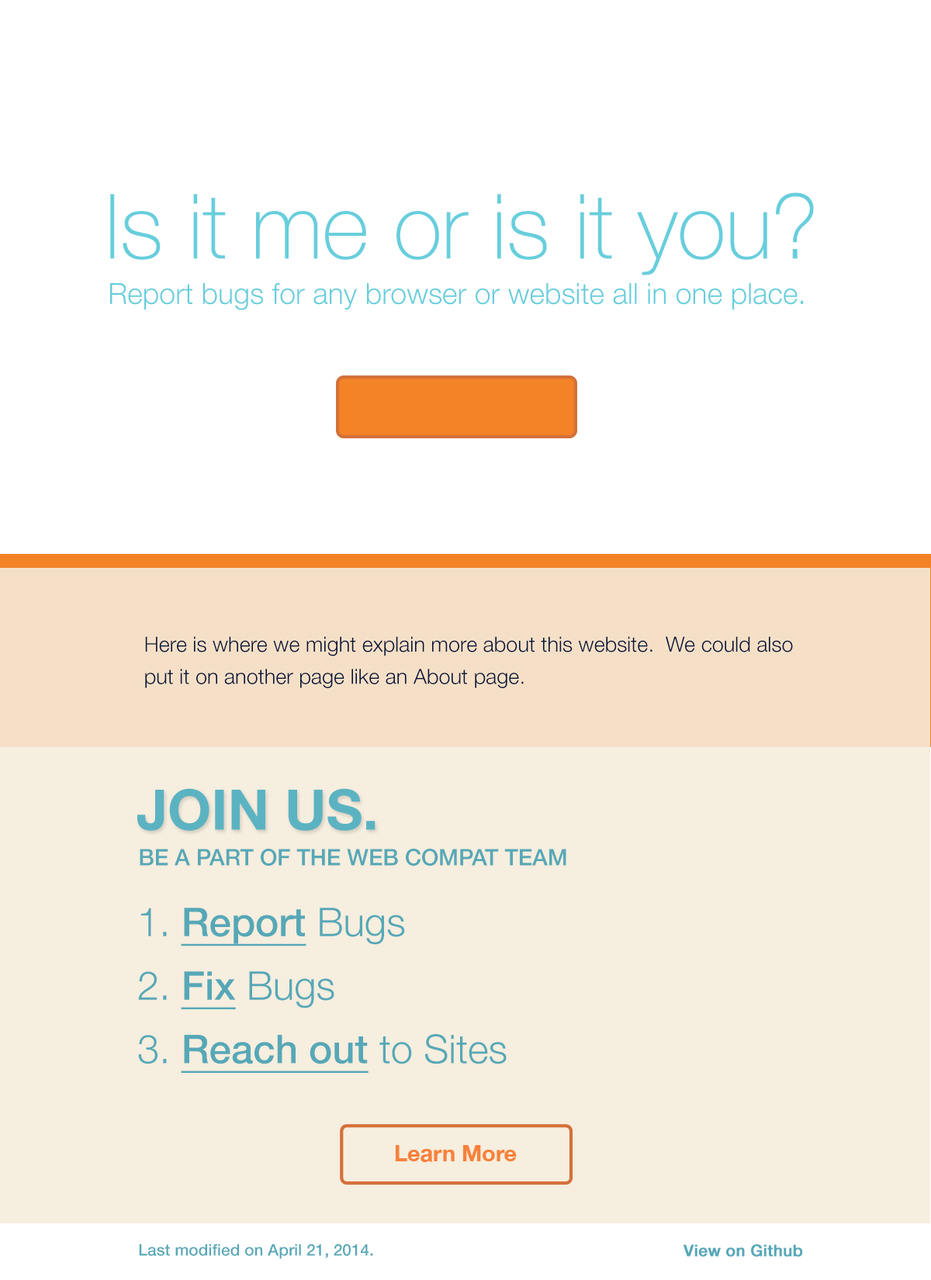
<style>
.page{position:relative;width:931px;height:1280px;background:#ffffff}
.page>*{position:absolute;margin:0}
.t1{font:89.8px "HelveticaNeue-Thin";color:#67cedc}
.t2{font:29.1px "HelveticaNeue-Light";color:#67cedc}
.t3{font:21px/32.3px "HelveticaNeue-Light";color:#07143a}
.t4{font:56px "HelveticaNeue-Bold";color:#5bb3c2;text-transform:uppercase}
.t5{font:22.6px "HelveticaNeue-Medium";color:#56a8b7;text-transform:uppercase}
.t6{font:39.7px/63.5px "HelveticaNeue-Medium";color:#56a8b7;text-decoration:underline}
.t7{font:39.7px/63.5px "HelveticaNeue-Light";color:#56a8b7;text-transform:uppercase}
.t8{font:39.7px/63.5px "HelveticaNeue-Light";color:#56a8b7}
.t9{font:16.2px "HelveticaNeue-Medium";color:#56a8b7}
.t10{font:16.2px "HelveticaNeue-Medium";color:#56a8b7;font-weight:bold}
</style>
<div class="page">
<p class="t1" style="left:110px;top:192px;width:704px;height:83px">Is it me or is it you?</p>
<p class="t2" style="left:110px;top:283px;width:694px;height:27px">Report bugs for any browser or website all in one place.</p>
<p class="t3" style="left:145px;top:636px;width:648px;height:52px">Here is where we might explain more about this website.  We could also <br>put it on another page like an About page.</p>
<p class="t4" style="left:137px;top:788px;width:239px;height:43px">JOIN US.</p>
<p class="t5" style="left:140px;top:849px;width:427px;height:17px">be a part of the web compat team</p>
<p class="t6" style="left:138px;top:908px;width:369px;height:165px"><span class="t7">1. </span>Report <span class="t8">Bugs<br>2. </span>Fix <span class="t8">Bugs<br>3. </span>Reach out <span class="t8">to Sites</span></p>
<p class="t9" style="left:139px;top:1244px;width:234px;height:16px">Last modified on April 21, 2014.</p>
<p class="t10" style="left:683px;top:1245px;width:120px;height:12px">View on Github</p>
</div>
